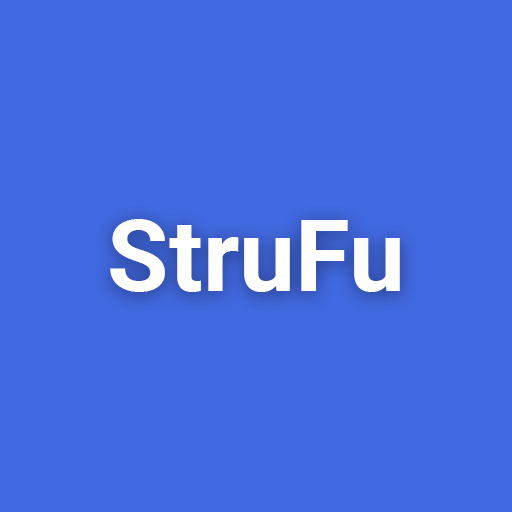
<style>
.page{position:relative;width:512px;height:512px;background:#4169e1}
.page>*{position:absolute;margin:0}
.t1{font:100px "Roboto-Bold";color:#ffffff}
</style>
<div class="page">
<p class="t1" style="left:110px;top:219px;width:290px;height:73px">StruFu</p>
</div>
